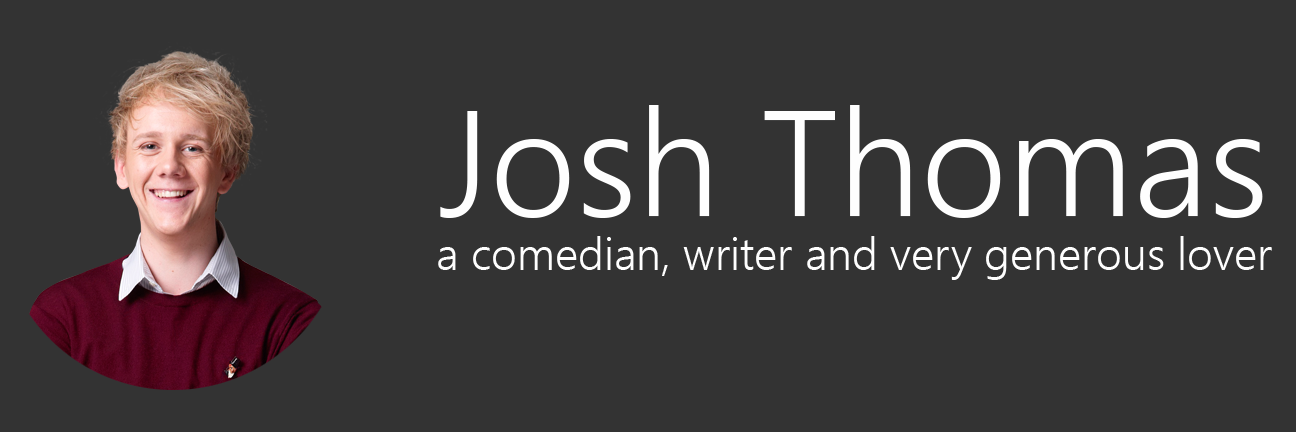
<style>
.page{position:relative;width:1296px;height:432px;background:#333333}
.page>*{position:absolute;margin:0}
.t1{font:45px "LeelawadeeUI-Semilight";color:#fefefe}
.t2{font:150px "LeelawadeeUI-Semilight";color:#fefefe}
</style>
<div class="page">
<p class="t1" style="left:438px;top:105px;width:834px;height:175px;text-align:center"><span class="t2">Josh Thomas<br></span>a comedian, writer and very generous lover</p>
</div>
